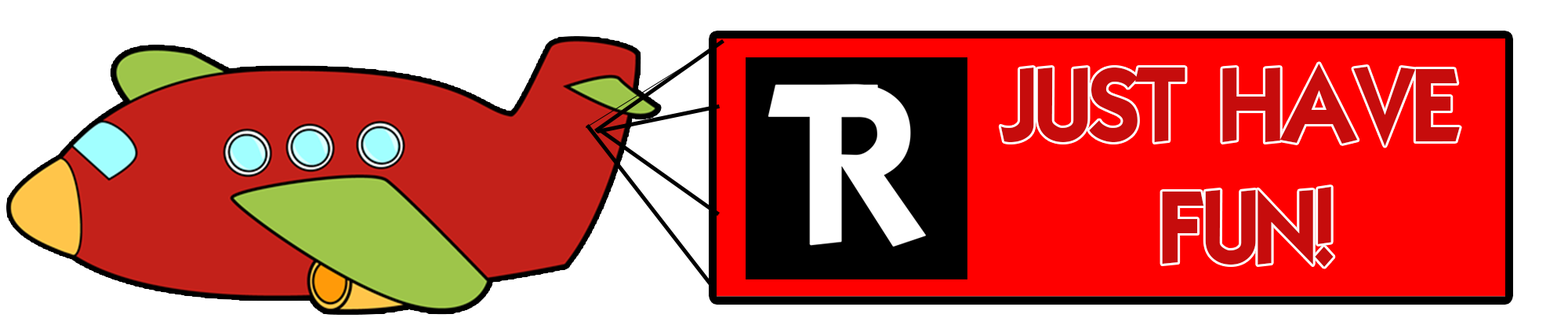
<style>
.page{position:relative;width:1568px;height:336px;background:#ffffff}
.page>*{position:absolute;margin:0}
.t1{font:101.9px "ELEGANCE";color:#c60c0c}
</style>
<div class="page">
<p class="t1" style="left:1000px;top:64px;width:460px;height:203px;text-align:center">JUST HAVE<br> FUN!</p>
</div>
